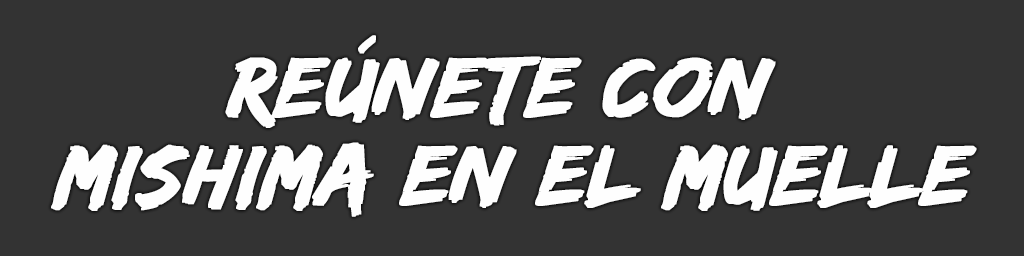
<style>
.page{position:relative;width:1024px;height:256px;background:#333333}
.page>*{position:absolute;margin:0}
.t1{font:88px/88px "EdoSZ";color:#fefefe;font-weight:bold;font-style:italic;scale:1.04 1}
</style>
<div class="page">
<p class="t1" style="left:51px;top:35px;width:926px;height:182px;text-align:center">Reúnete con <br>Mishima en el muelle</p>
</div>
